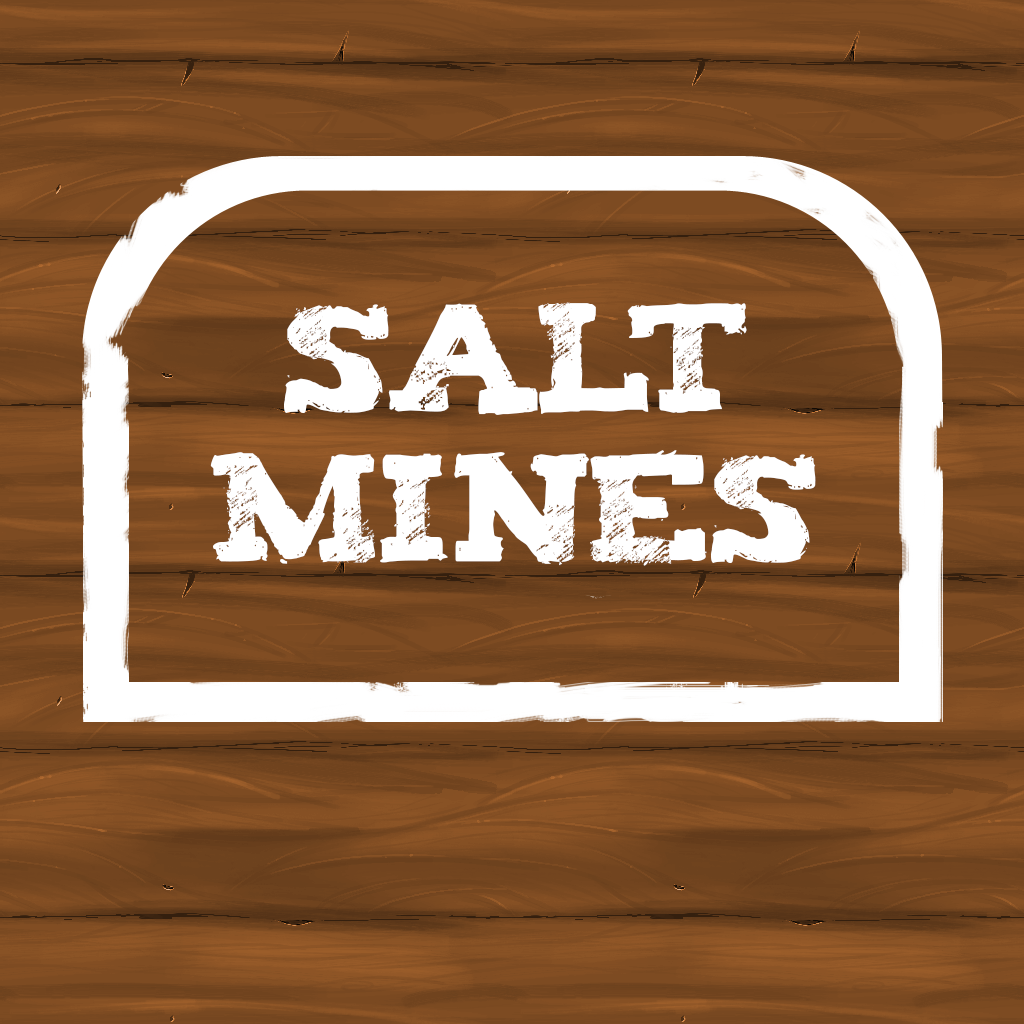
<style>
.page{position:relative;width:1024px;height:1024px}
.page>*{position:absolute;margin:0}
.t1{font:125px "Tiza";color:#ffffff}
</style>
<div class="page">
<p class="t1" style="left:210px;top:302px;width:606px;height:264px;text-align:center">SALT<br>MINES</p>
</div>
